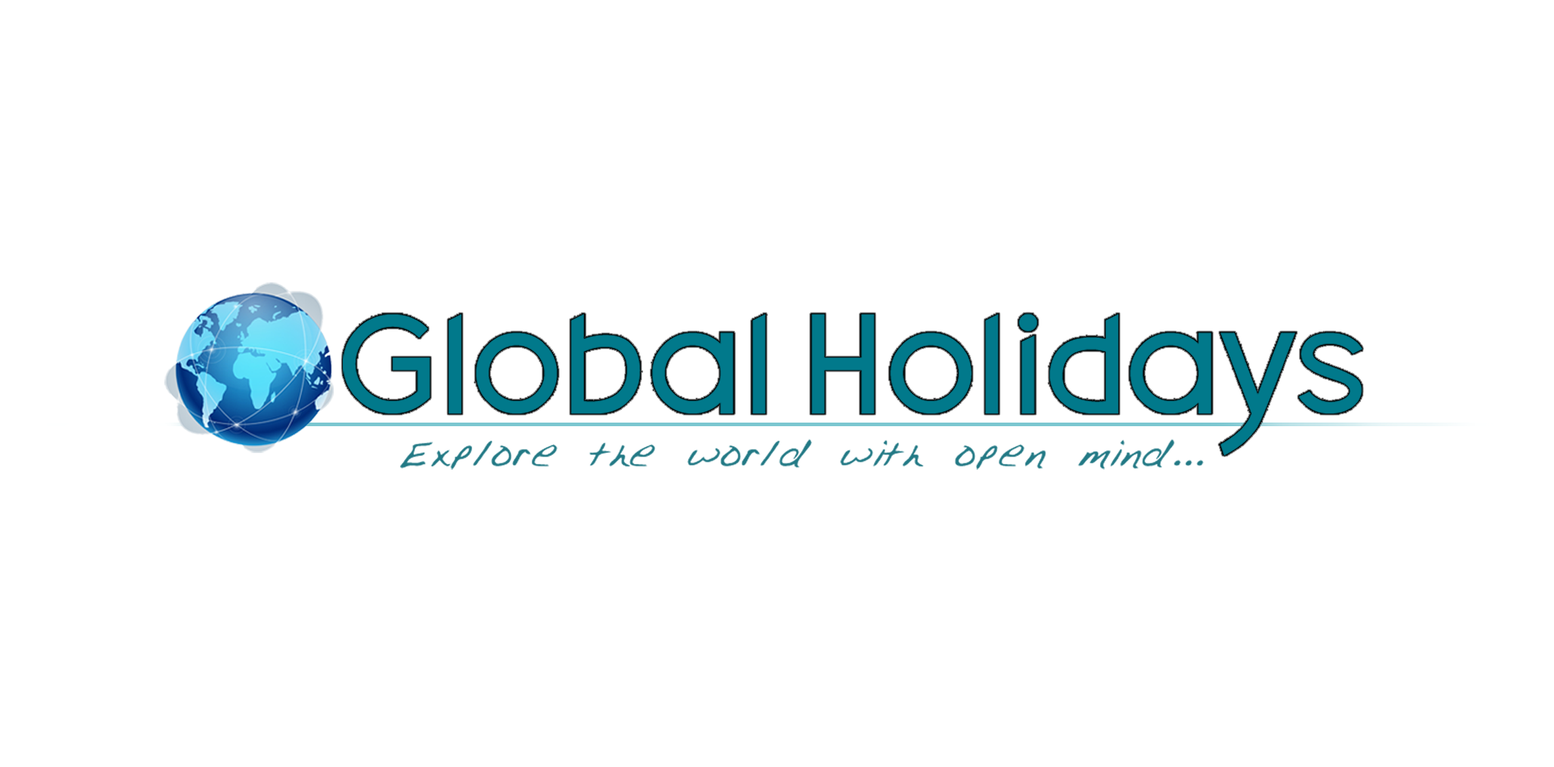
<style>
.page{position:relative;width:1554px;height:767px;background:#ffffff}
.page>*{position:absolute;margin:0}
.t1{font:140.8px "Dolgan";color:#01798b}
.t2{font:43px "Slater";color:#227985;scale:1.08 1}
</style>
<div class="page">
<p class="t1" style="left:343px;top:314px;width:1019px;height:142px">Global Holidays</p>
<p class="t2" style="left:400px;top:439px;width:804px;height:31px">Explore the world with open mind...</p>
</div>
